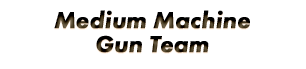
<style>
.page{position:relative;width:306px;height:69px;background:#ffffff}
.page>*{position:absolute;margin:0}
.t1{font:24px/24px "FuturaPT-HeavyObl";font-weight:bold}
</style>
<div class="page">
<p class="t1" style="left:54px;top:10px;width:196px;height:43px;text-align:center">Medium Machine<br>Gun Team</p>
</div>
